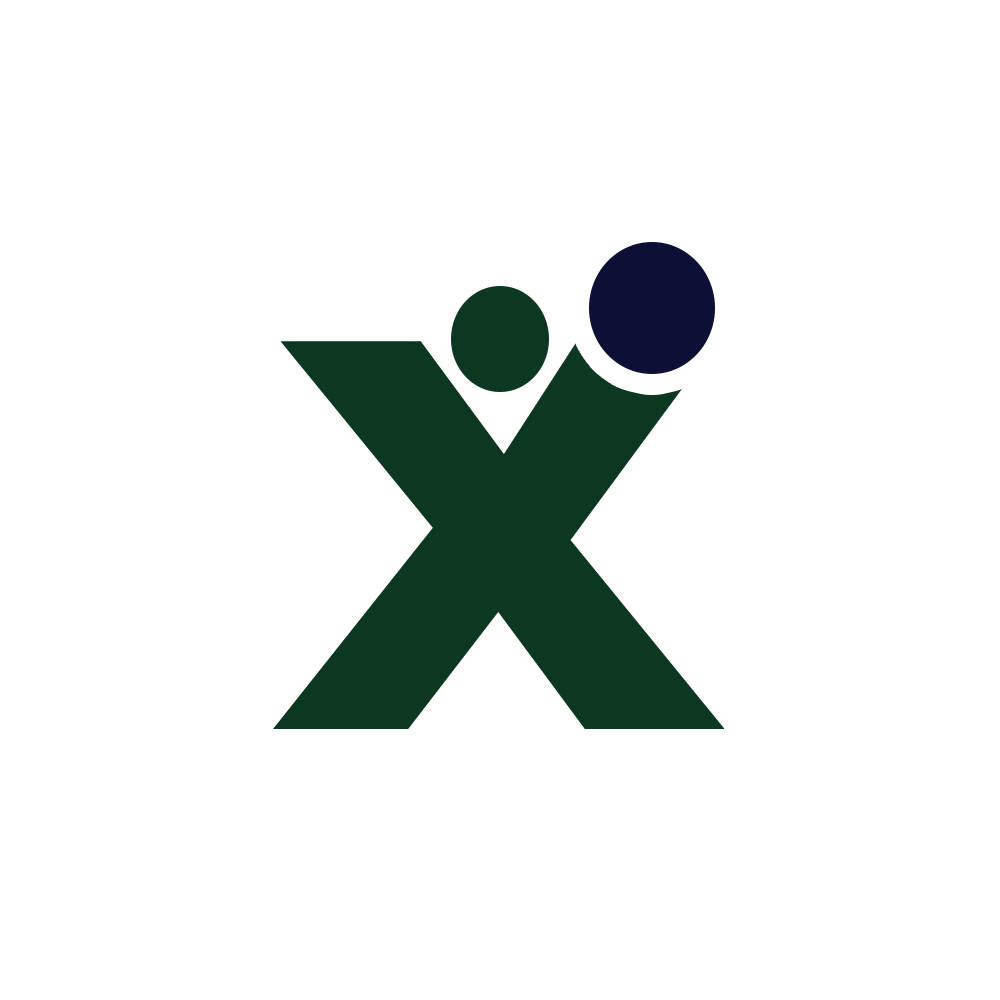
<style>
.page{position:relative;width:1000px;height:1000px;background:#ffffff}
.page>*{position:absolute;margin:0}
.t1{font:764.6px "Bahnschrift-Bold";color:#0c3720;font-weight:bold;scale:1.24 1}
</style>
<div class="page">
<p class="t1" style="left:273px;top:341px;width:452px;height:388px">x</p>
</div>
